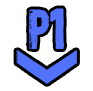
<style>
.page{position:relative;width:93px;height:91px;background:#ffffff}
.page>*{position:absolute;margin:0}
.t1{font:60px "CFJacquesParizeau-Regular";color:#5272fb}
</style>
<div class="page">
<p class="t1" style="left:28px;top:8px;width:37px;height:41px">P1</p>
</div>
